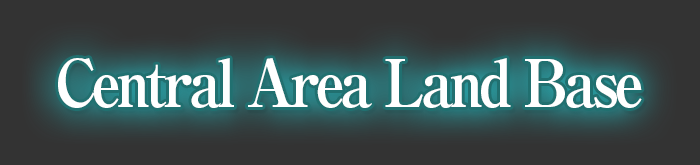
<style>
.page{position:relative;width:700px;height:165px;background:#333333}
.page>*{position:absolute;margin:0}
.t1{font:66px "RyuminPro-ExBold";letter-spacing:-0.08em;color:#ffffff;scale:0.9 1}
</style>
<div class="page">
<p class="t1" style="left:58px;top:58px;width:584px;height:50px">Central Area Land Base</p>
</div>
